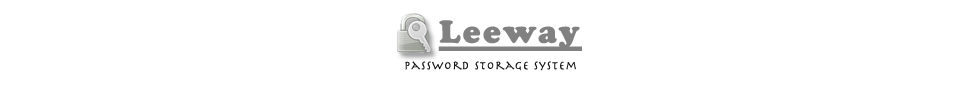
<style>
.page{position:relative;width:980px;height:89px;background:#ffffff}
.page>*{position:absolute;margin:0}
.t1{font:33px "CooperBlack";letter-spacing:0.075em;color:#818181;text-decoration:underline}
.t2{font:12px "Herculanum";letter-spacing:0.075em;color:#151515}
</style>
<div class="page">
<p class="t1" style="left:438px;top:20px;width:144px;height:31px">Leeway</p>
<p class="t2" style="left:405px;top:61px;width:171px;height:10px">Password Storage System</p>
</div>
